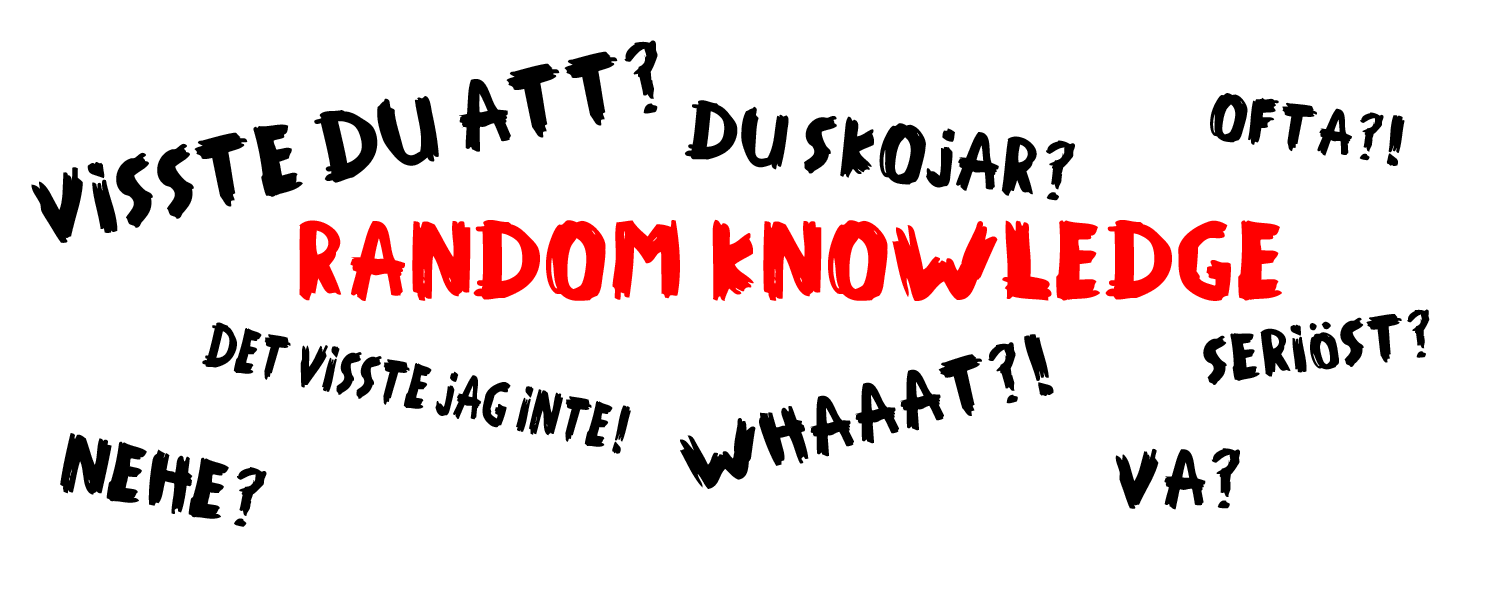
<style>
.page{position:relative;width:1500px;height:600px;background:#ffffff}
.page>*{position:absolute;margin:0}
.t1{font:72px "MOGAMBO!";color:#000000}
.t2{font:60px "MOGAMBO!";color:#000000}
.t3{font:48px "MOGAMBO!";color:#000000}
.t4{font:80px "MOGAMBO!";color:#ff0000}
.t5{font:46px "MOGAMBO!";color:#000000;scale:0.78 1}
</style>
<div class="page">
<p class="t1" style="left:31px;top:40px;width:627px;height:203px;rotate:-12deg">Visste du att?</p>
<p class="t2" style="left:684px;top:100px;width:391px;height:101px;rotate:6deg">Du skojar?</p>
<p class="t3" style="left:1210px;top:93px;width:195px;height:73px;rotate:8deg">Ofta?!</p>
<p class="t4" style="left:299px;top:219px;width:983px;height:82px">Random Knowledge</p>
<p class="t3" style="left:1203px;top:309px;width:227px;height:76px;rotate:-7deg">Seriöst?</p>
<p class="t5" style="left:202px;top:322px;width:429px;height:132px;rotate:12deg">Det visste jag inte!</p>
<p class="t2" style="left:680px;top:334px;width:374px;height:155px;rotate:-16deg">Whaaat?!</p>
<p class="t2" style="left:60px;top:433px;width:207px;height:94px;rotate:11deg">Nehe?</p>
<p class="t2" style="left:1115px;top:448px;width:125px;height:62px">Va?</p>
</div>
